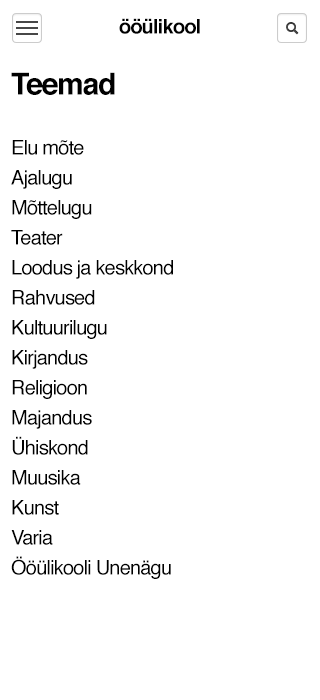
<style>
.page{position:relative;width:320px;height:700px;background:#ffffff}
.page>*{position:absolute;margin:0}
.t1{font:20px "Helvetica-Bold";letter-spacing:-0.04em;color:#000000}
.t2{font:20px/30px "Helvetica";letter-spacing:-0.04em;color:#000000}
.t3{font:30px/30px "Helvetica-Bold";letter-spacing:-0.04em;color:#000000}
</style>
<div class="page">
<p class="t1" style="left:119px;top:18px;width:81px;height:16px">ööülikool</p>
<p class="t2" style="left:11px;top:72px;width:162px;height:507px"><span class="t3">Teemad<br></span><br>Elu mõte<br>Ajalugu<br>Mõttelugu<br>Teater<br>Loodus ja keskkond<br>Rahvused<br>Kultuurilugu<br>Kirjandus<br>Religioon<br>Majandus<br>Ühiskond<br>Muusika<br>Kunst<br>Varia<br>Ööülikooli Unenägu</p>
</div>
